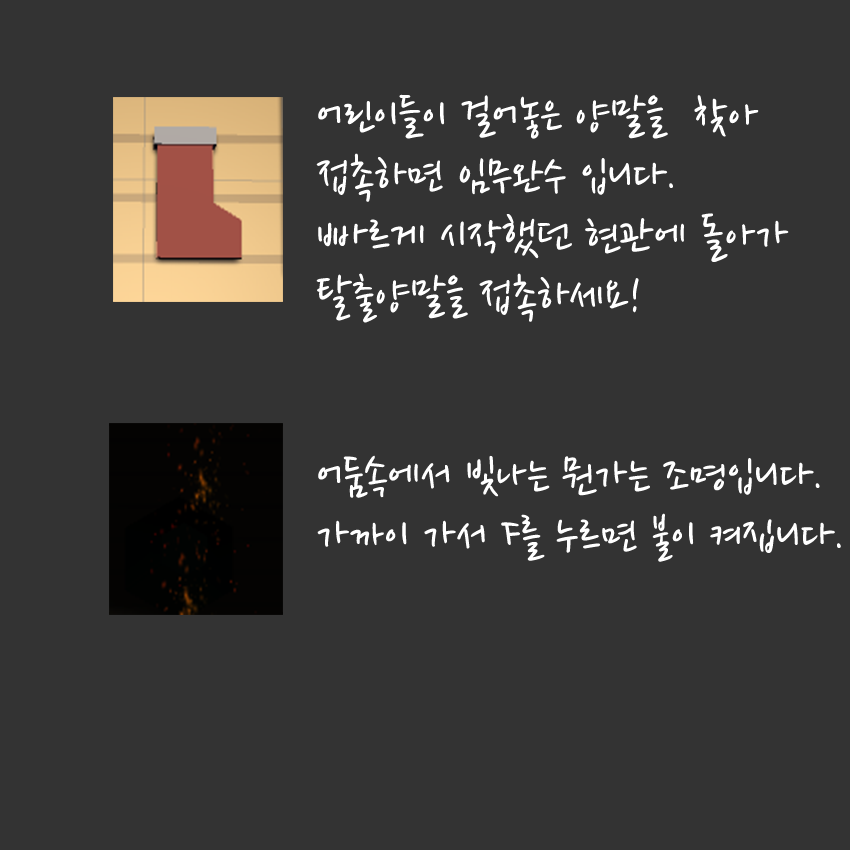
<style>
.page{position:relative;width:850px;height:850px;background:#333333}
.page>*{position:absolute;margin:0}
.t1{font:50px "NanumPen";color:#ffffff}
</style>
<div class="page">
<p class="t1" style="left:316px;top:94px;width:525px;height:468px">어린이들이 걸어놓은 양말을  찾아 접촉하면 임무완수 입니다.<br>빠르게 시작했던 현관에 돌아가 탈출양말을 접촉하세요!<br><br><br>어둠속에서 빛나는 뭔가는 조명입니다.<br>가까이 가서 F를 누르면 불이 켜집니다.</p>
</div>
